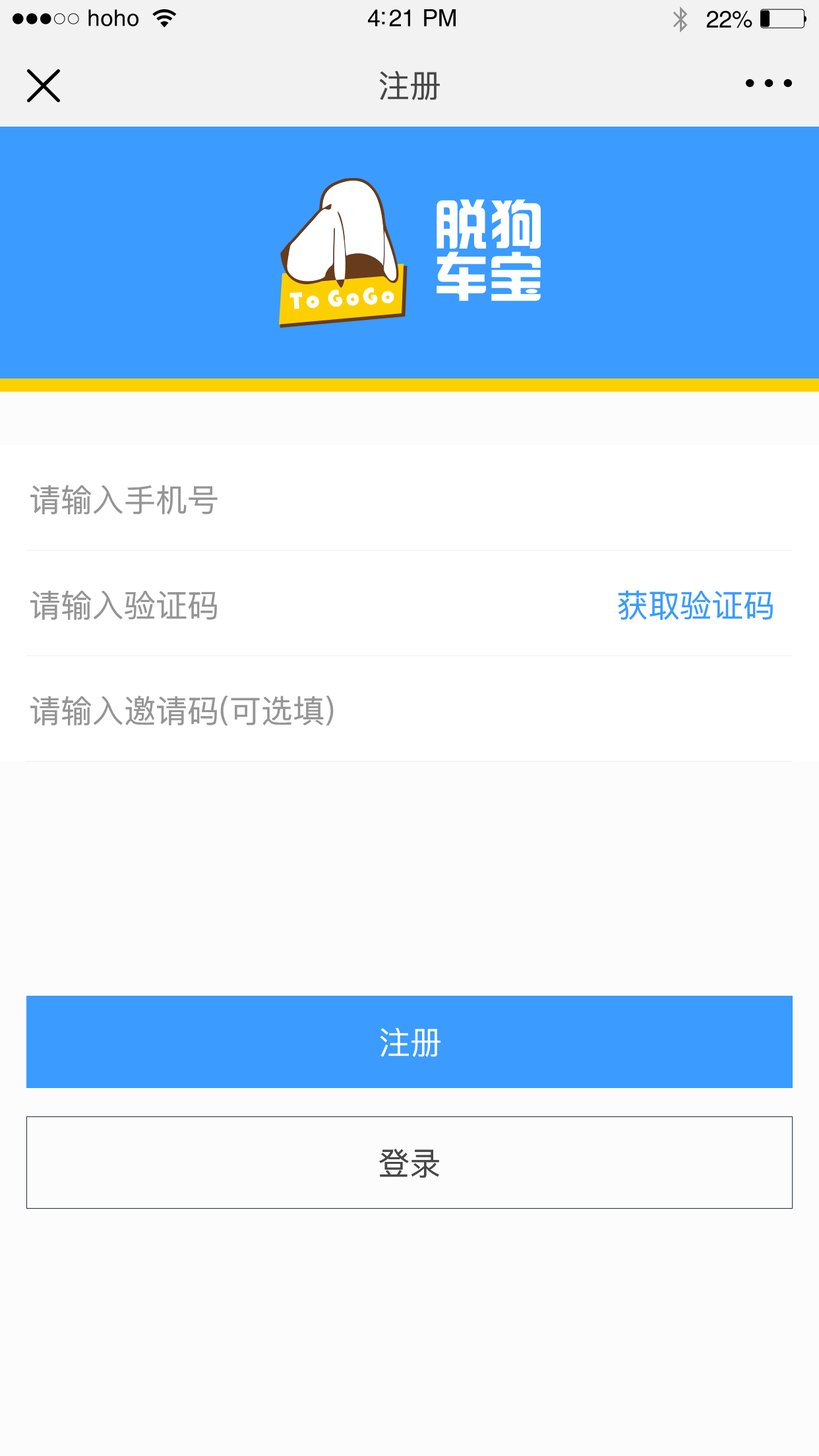
<style>
.page{position:relative;width:819px;height:1456px;background:#fdfcfd}
.page>*{position:absolute;margin:0}
.t1{font:22.8px "Helvetica";letter-spacing:0.02em;color:#000000}
.t2{font:23.8px "Helvetica";letter-spacing:-0.02em;color:#000000}
.t3{font:31.7px "PingFang-SC-Medium";color:#474747}
.t4{font:31.7px "PingFang-SC-Medium";color:#959595}
.t5{font:31.7px "PingFang-SC-Medium";color:#3b9bfe}
.t6{font:31.7px "PingFang-SC-Medium";color:#ffffff}
</style>
<div class="page">
<p class="t1" style="left:88px;top:9px;width:50px;height:17px">hoho</p>
<p class="t2" style="left:368px;top:9px;width:88px;height:17px">4:21 PM</p>
<p class="t2" style="left:706px;top:11px;width:46px;height:17px">22%</p>
<p class="t3" style="left:379px;top:71px;width:61px;height:29px">注册</p>
<p class="t4" style="left:30px;top:485px;width:188px;height:29px">请输入手机号</p>
<p class="t4" style="left:30px;top:590px;width:187px;height:30px">请输入验证码</p>
<p class="t5" style="left:618px;top:590px;width:155px;height:30px">获取验证码</p>
<p class="t4" style="left:30px;top:696px;width:304px;height:30px">请输入邀请码(可选填)</p>
<p class="t6" style="left:380px;top:1027px;width:60px;height:30px">注册</p>
<p class="t3" style="left:379px;top:1149px;width:60px;height:29px">登录</p>
</div>
